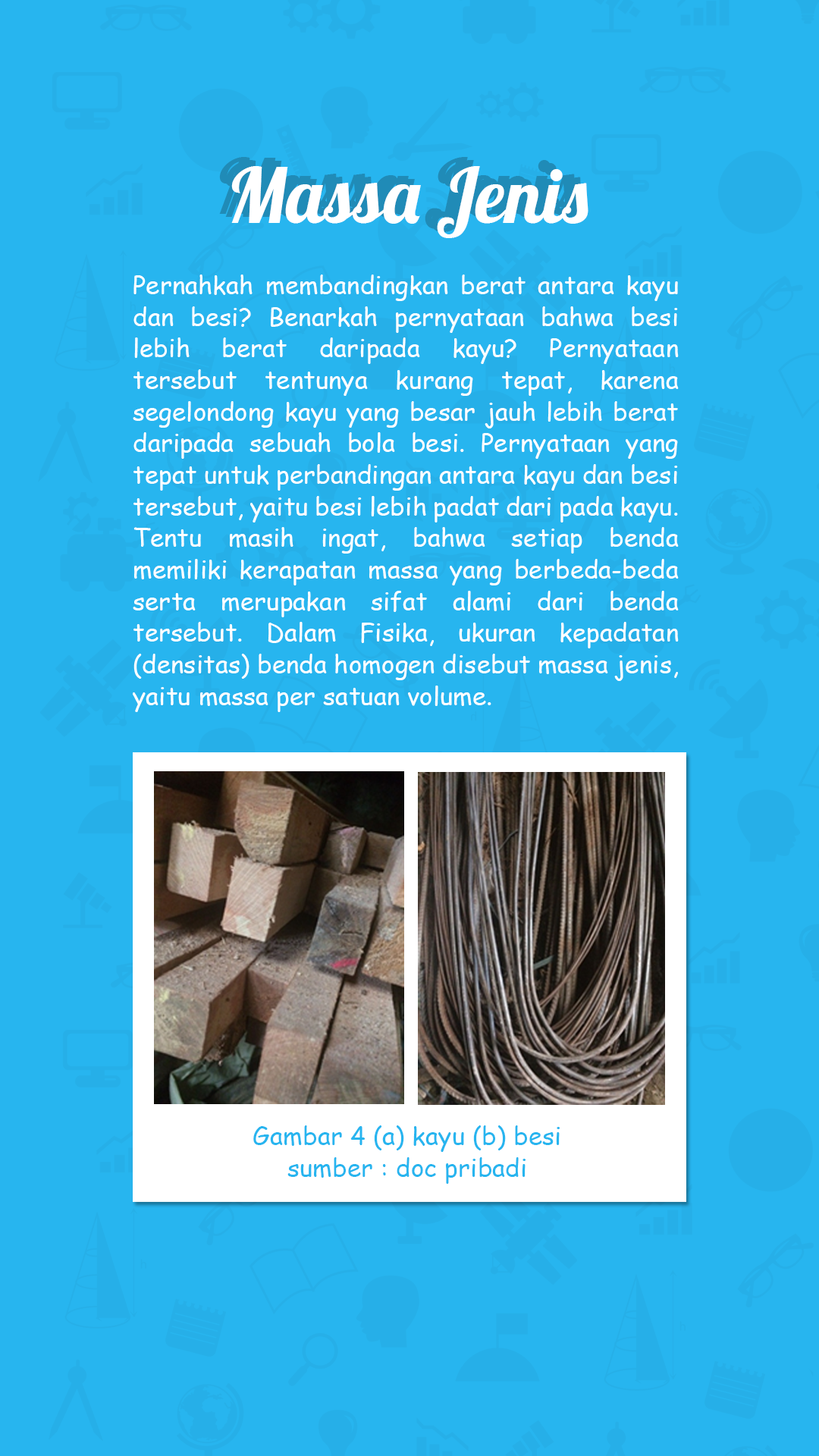
<style>
.page{position:relative;width:819px;height:1456px;background:#27b5ef}
.page>*{position:absolute;margin:0}
.t1{font:75.8px "Lobster-Regular"}
.t2{font:75.8px "Lobster-Regular";color:#ffffff}
.t3{font:25.3px/31.6px "ComicSansMS";color:#ffffff}
.t4{font:25.3px/31.6px "ComicSansMS";color:#27b5ef}
</style>
<div class="page">
<p class="t1" style="left:219px;top:157px;width:357px;height:72px">Massa Jenis</p>
<p class="t1" style="left:225px;top:160px;width:357px;height:72px">Massa Jenis</p>
<p class="t2" style="left:231px;top:166px;width:357px;height:72px">Massa Jenis</p>
<p class="t3" style="left:133px;top:275px;width:546px;height:437px;text-align:justify">Pernahkah membandingkan berat antara kayu dan besi? Benarkah pernyataan bahwa besi lebih berat daripada kayu? Pernyataan tersebut tentunya kurang tepat, karena segelondong kayu yang besar jauh lebih berat daripada sebuah bola besi. Pernyataan yang tepat untuk perbandingan antara kayu dan besi tersebut, yaitu besi lebih padat dari pada kayu. Tentu masih ingat, bahwa setiap benda memiliki kerapatan massa yang berbeda-beda serta merupakan sifat alami dari benda tersebut. Dalam Fisika, ukuran kepadatan (densitas) benda homogen disebut massa jenis, yaitu massa per satuan volume.</p>
<p class="t4" style="left:253px;top:1125px;width:307px;height:59px;text-align:center">Gambar 4 (a) kayu (b) besi<br>sumber : doc pribadi</p>
</div>
